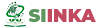
<style>
.page{position:relative;width:97px;height:28px;background:#ffffff}
.page>*{position:absolute;margin:0}
.t1{font:18px "Montserrat-Black";letter-spacing:0.005em;color:#c14a61}
.t2{font:18px "Montserrat-Black";letter-spacing:0.005em;color:#5e9660}
</style>
<div class="page">
<p class="t1" style="left:28px;top:9px;width:68px;height:13px"><span class="t2">SI</span>INKA</p>
</div>
